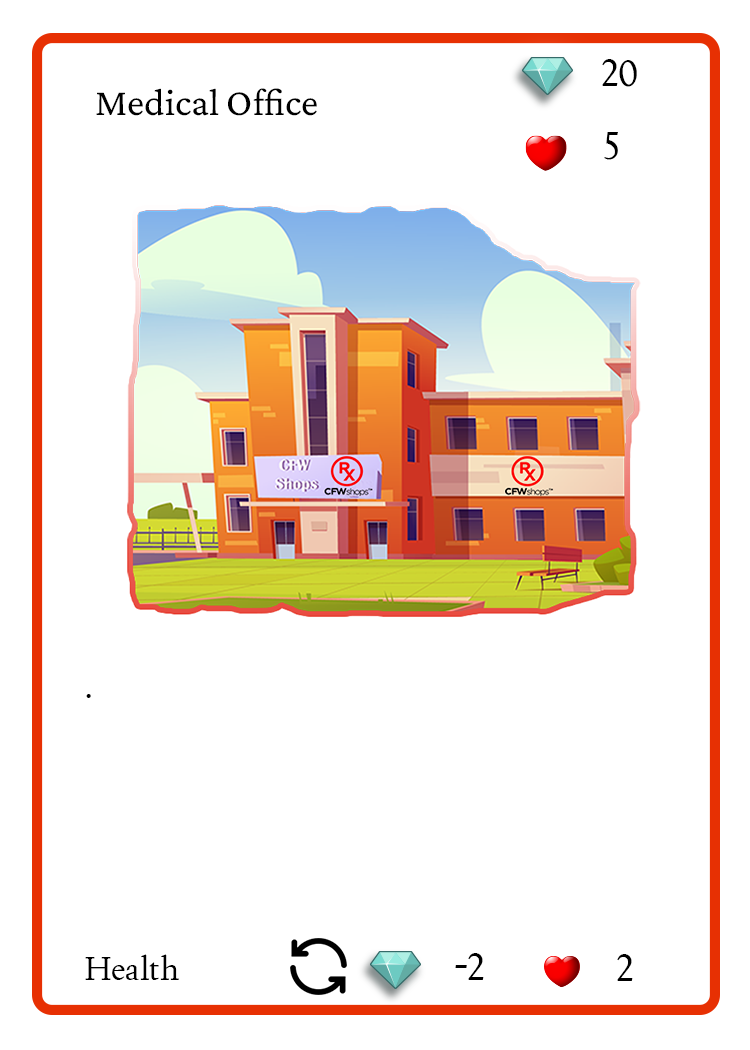
<style>
.page{position:relative;width:750px;height:1050px;background:#ffffff}
.page>*{position:absolute;margin:0}
.t1{font:37.5px "Joan-Regular";color:#000000;text-transform:uppercase}
.t2{font:38.9px "CrimsonPro-Regular";color:#000000}
.t3{font:33.3px "Joan-Regular";color:#000000}
</style>
<div class="page">
<p class="t1" style="left:602px;top:59px;width:35px;height:28px">20</p>
<p class="t2" style="left:96px;top:88px;width:221px;height:28px">Medical Office</p>
<p class="t1" style="left:604px;top:132px;width:14px;height:28px">5</p>
<p class="t3" style="left:86px;top:694px;width:5px;height:4px">.</p>
<p class="t1" style="left:455px;top:953px;width:29px;height:27px">-2</p>
<p class="t3" style="left:85px;top:954px;width:94px;height:26px">Health</p>
<p class="t1" style="left:617px;top:954px;width:16px;height:27px">2</p>
</div>
